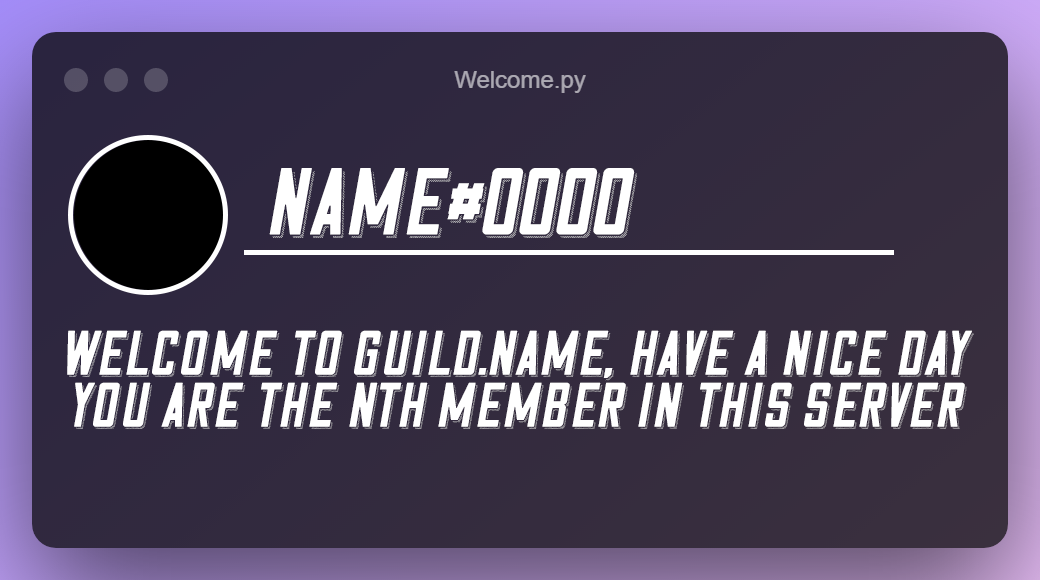
<style>
.page{position:relative;width:1040px;height:580px}
.page>*{position:absolute;margin:0}
.t1{font:100px "CosmicLager-Shadow";color:#ffffff;font-style:italic}
.t2{font:66px/52px "CosmicLager-Shadow";color:#ffffff;font-style:italic}
</style>
<div class="page">
<p class="t1" style="left:269px;top:168px;width:368px;height:70px">name#0000</p>
<p class="t2" style="left:67px;top:330px;width:907px;height:99px;text-align:center">welcome to guild.name, have a nice day<br>you are the nth member in this server</p>
</div>
